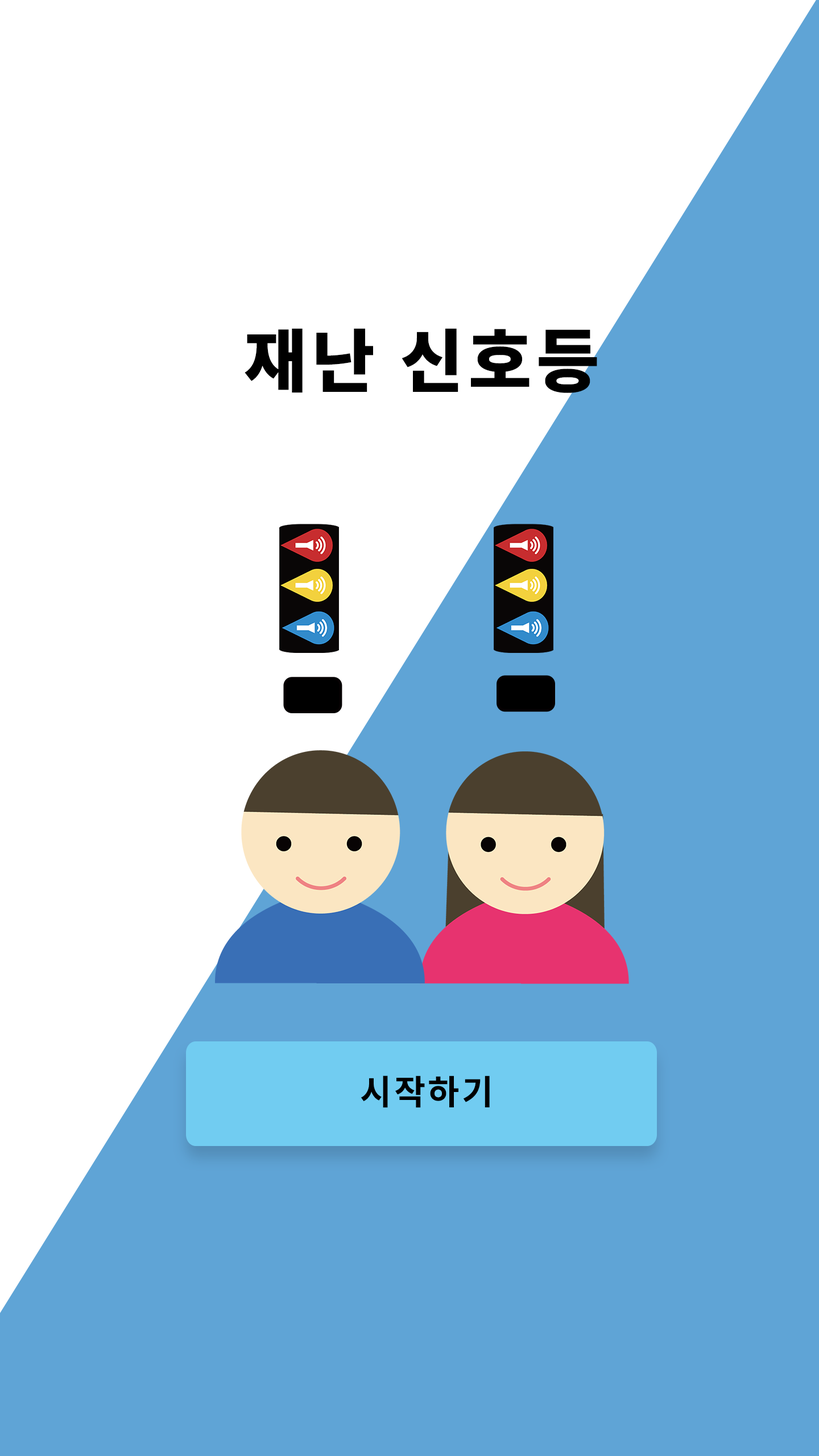
<style>
.page{position:relative;width:819px;height:1456px;background:#5fa4d6}
.page>*{position:absolute;margin:0}
.t1{font:68.2px "NotoSansCJKkr-Black";letter-spacing:0.075em;color:#000000}
.t2{font:34.3px "NotoSansCJKkr-Bold";letter-spacing:0.075em;color:#000000}
</style>
<div class="page">
<p class="t1" style="left:245px;top:328px;width:352px;height:65px">재난 신호등</p>
<p class="t2" style="left:361px;top:1075px;width:129px;height:33px">시작하기</p>
</div>
